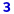
<style>
.page{position:relative;width:14px;height:14px;background:#ffffff}
.page>*{position:absolute;margin:0}
.t1{font:20px "OfficinaSansMediumC";color:#0500cd}
</style>
<div class="page">
<p class="t1" style="left:3px;top:2px;width:8px;height:10px">з</p>
</div>
